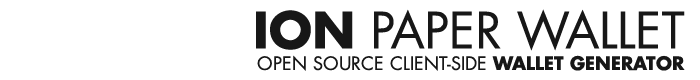
<style>
.page{position:relative;width:700px;height:80px;background:#ffffff}
.page>*{position:absolute;margin:0}
.t1{font:48.7px "FuturaLT-Book";color:#171717}
.t2{font:48.7px "FuturaLT-Bold";color:#171717}
.t3{font:18px "FuturaLT-Book";color:#171717;text-transform:uppercase}
.t4{font:18px "FuturaLT-Bold";color:#171717;text-transform:uppercase}
</style>
<div class="page">
<p class="t1" style="left:256px;top:9px;width:429px;height:42px"><span class="t2">ION</span> PAPER WALLET</p>
<p class="t3" style="left:257px;top:55px;width:428px;height:16px">Open Source Client-side <span class="t4">wallet generator</span></p>
</div>
